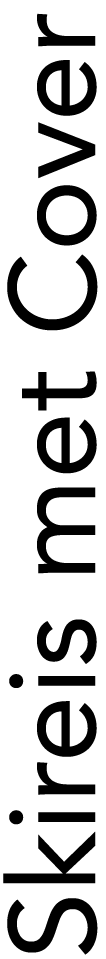
<style>
.page{position:relative;width:106px;height:959px;background:#ffffff}
.page>*{position:absolute;margin:0}
.t1{font:121px "Avenir-Roman";color:#000000}
</style>
<div class="page">
<p class="t1" style="left:3px;top:13px;width:95px;height:942px;rotate:-90deg">Skireis met Cover</p>
</div>
